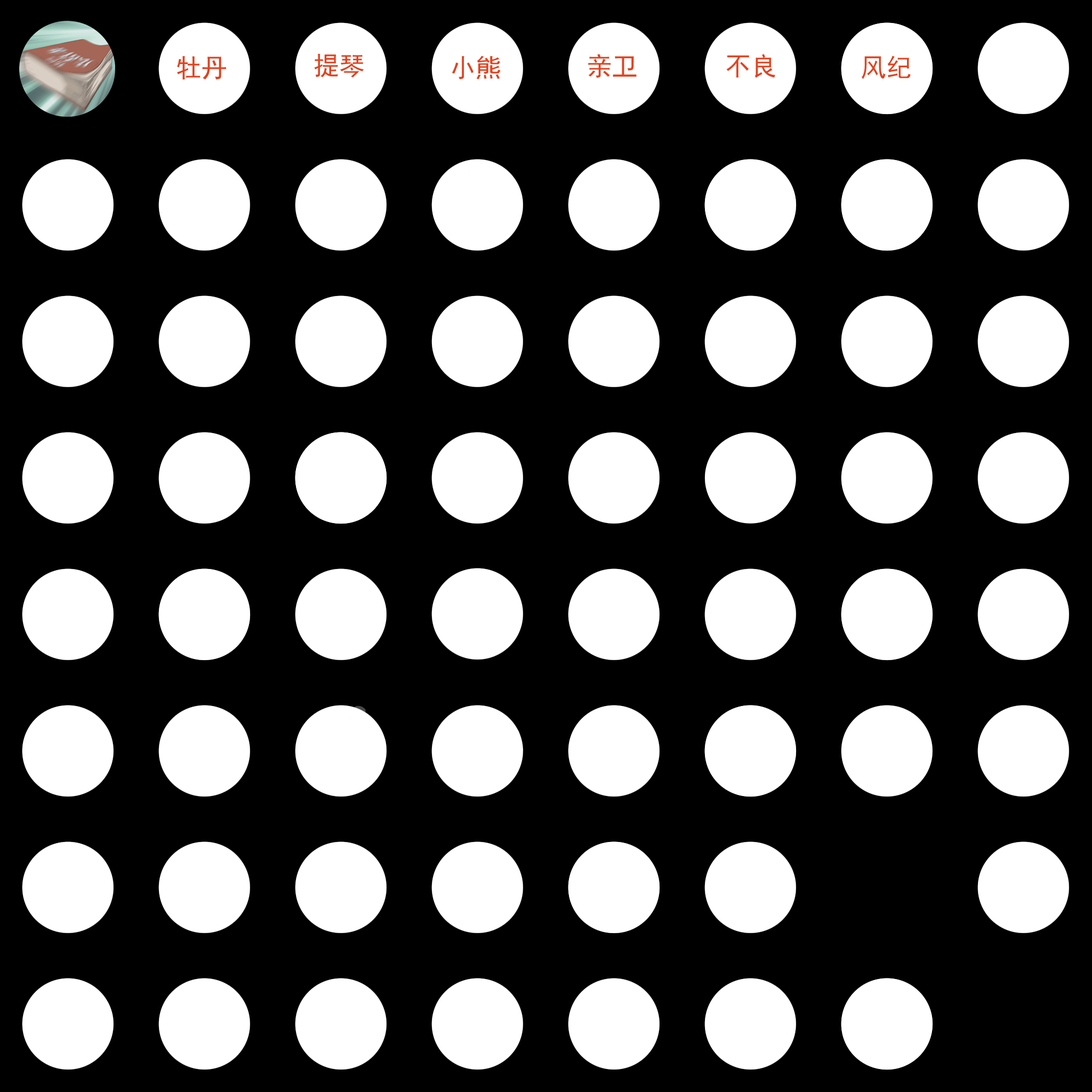
<style>
.page{position:relative;width:1092px;height:1092px;background:#000000}
.page>*{position:absolute;margin:0}
.t1{font:25.6px "SimHei";color:#e34220}
</style>
<div class="page">
<p class="t1" style="left:314px;top:54px;width:50px;height:24px">提琴</p>
<p class="t1" style="left:588px;top:54px;width:49px;height:24px">亲卫</p>
<p class="t1" style="left:726px;top:54px;width:50px;height:24px">不良</p>
<p class="t1" style="left:177px;top:56px;width:49px;height:23px">牡丹</p>
<p class="t1" style="left:452px;top:55px;width:49px;height:24px">小熊</p>
<p class="t1" style="left:862px;top:55px;width:49px;height:24px">风纪</p>
</div>
